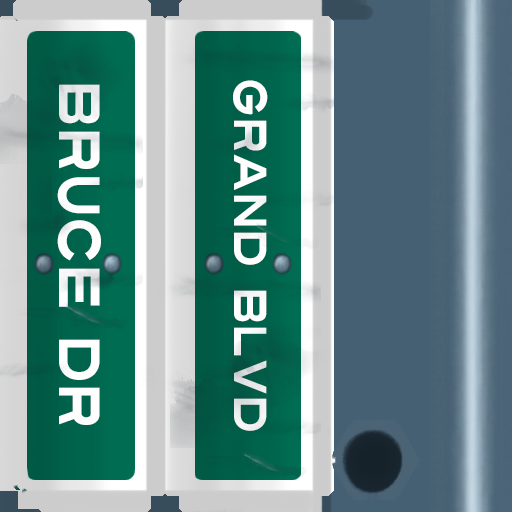
<style>
.page{position:relative;width:512px;height:512px}
.page>*{position:absolute;margin:0}
.t1{font:58px "Turnpike";color:#fefeff;scale:0.75 1}
.t2{font:46px "Turnpike";color:#fefeff;scale:0.75 1}
</style>
<div class="page">
<p class="t1" style="left:57px;top:84px;width:44px;height:341px;rotate:90deg">Bruce DR</p>
<p class="t2" style="left:233px;top:80px;width:35px;height:351px;rotate:90deg">Grand BLVD</p>
</div>
